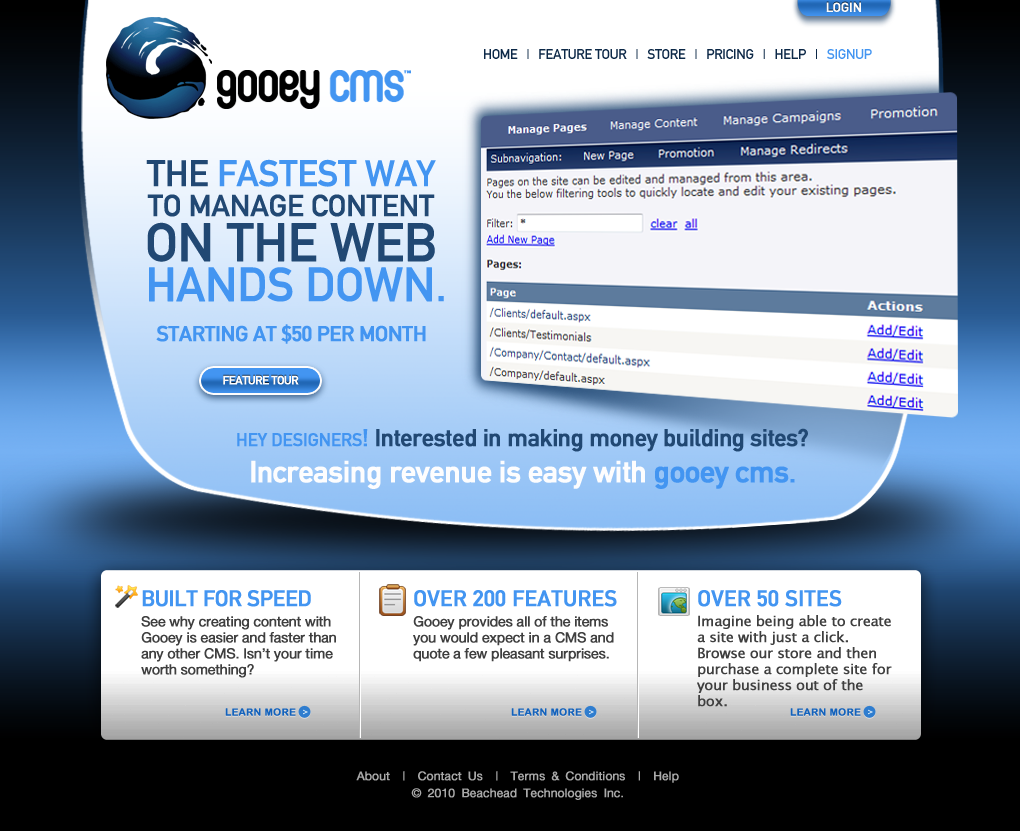
<style>
.page{position:relative;width:1020px;height:831px}
.page>*{position:absolute;margin:0}
.t1{font:13px "DINMittelschrift";color:#fefdfd;font-weight:bold}
.t2{font:14px "DINMittelschrift";letter-spacing:-0.025em;color:#0c2847}
.t3{font:14px "DINMittelschrift";letter-spacing:-0.025em;color:#4395f1}
.t4{font:21px/40px "DINMittelschrift";letter-spacing:-0.025em;color:#4395f1;font-weight:bold}
.t5{font:36px/36px "DINMittelschrift";letter-spacing:-0.025em;color:#214873;font-weight:bold}
.t6{font:36px/36px "DINMittelschrift";letter-spacing:-0.025em;color:#4395f1;font-weight:bold}
.t7{font:30px/30px "DINMittelschrift";letter-spacing:-0.025em;color:#214873;font-weight:bold}
.t8{font:53px/45px "DINMittelschrift";letter-spacing:-0.025em;color:#214873;font-weight:bold}
.t9{font:47px/40px "DINMittelschrift";letter-spacing:-0.025em;color:#4395f1;font-weight:bold}
.t10{font:12px "DINMittelschrift";letter-spacing:-0.05em;color:#fefdfd;font-weight:bold}
.t11{font:24px/30px "DINMittelschrift";letter-spacing:-0.025em;color:#214873;font-weight:bold}
.t12{font:18px/30px "DINMittelschrift";letter-spacing:-0.025em;color:#4395f1;font-weight:bold}
.t13{font:24px/30px "DINMittelschrift";letter-spacing:-0.025em;color:#4395f1;font-weight:bold}
.t14{font:30px/30px "DINMittelschrift";letter-spacing:-0.025em;color:#fdfdfe;font-weight:bold}
.t15{font:30px/30px "DINMittelschrift";letter-spacing:-0.025em;color:#4395f1;font-weight:bold}
.t16{font:22px "DINMittelschrift";letter-spacing:-0.025em;color:#4395f1;font-weight:bold}
.t17{font:22px "DINMittelschrift";color:#4395f1;font-weight:bold}
.t18{font:14px/16px "HelveticaNeue-Roman";letter-spacing:-0.025em;color:#3f3f3f;font-weight:bold}
.t19{font:14px/16px "LucidaGrande";letter-spacing:-0.025em;color:#3f3f3f;font-weight:bold}
.t20{font:12px "HelveticaNeue-Roman";letter-spacing:-0.01em;color:#a9a9a9;font-weight:bold}
</style>
<div class="page">
<p class="t1" style="left:826px;top:2px;width:35px;height:10px">LOGIN</p>
<p class="t2" style="left:484px;top:49px;width:388px;height:10px">HOME   |   FEATURE TOUR   |   STORE   |   PRICING   |   HELP   |   <span class="t3">SIGNUP</span></p>
<p class="t4" style="left:146px;top:159px;width:298px;height:185px;text-align:center"><span class="t5">THE </span><span class="t6">FASTEST WAY<br></span><span class="t7">TO MANAGE CONTENT </span><span class="t8">ON THE WEB<br> </span><span class="t9">HANDS DOWN.<br></span>STARTING AT $50 PER MONTH</p>
<p class="t10" style="left:223px;top:375px;width:76px;height:10px">FEATURE TOUR</p>
<p class="t11" style="left:237px;top:428px;width:571px;height:61px;text-align:center"><span class="t12">HEY DESIGNERS</span><span class="t13">!</span> Interested in making money building sites?<br><span class="t14">Increasing revenue is easy with </span><span class="t15">gooey cms.</span></p>
<p class="t16" style="left:142px;top:590px;width:169px;height:17px">BUILT FOR SPEED</p>
<p class="t17" style="left:414px;top:590px;width:203px;height:17px">OVER 200 FEATURES</p>
<p class="t17" style="left:698px;top:590px;width:144px;height:17px">OVER 50 SITES</p>
<p class="t18" style="left:141px;top:616px;width:195px;height:62px">See why creating content with Gooey is easier and faster than any other CMS. Isn’t your time worth something?</p>
<p class="t18" style="left:413px;top:616px;width:201px;height:46px">Gooey provides all of the items you would expect in a CMS and quote a few pleasant surprises.</p>
<p class="t19" style="left:697px;top:615px;width:195px;height:92px">Imagine being able to create a site with just a click. Browse our store and then<br>purchase a complete site for your business out of the box.</p>
<p class="t20" style="left:356px;top:771px;width:323px;height:29px;text-align:center">About  |  Contact Us  |  Terms &amp; Conditions  |  Help<br>© 2010 Beachead Technologies Inc.</p>
</div>
